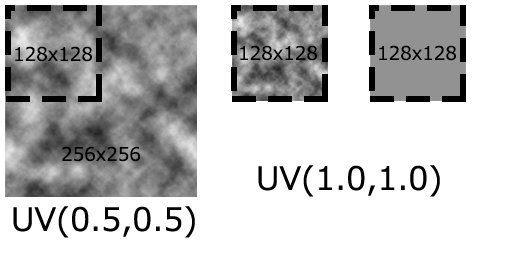
<style>
.page{position:relative;width:512px;height:256px;background:#ffffff}
.page>*{position:absolute;margin:0}
.t1{font:18.7px "MeiryoUI";color:#000000}
.t2{font:32px "MeiryoUI";color:#000000}
</style>
<div class="page">
<p class="t1" style="left:15px;top:46px;width:77px;height:16px">128x128</p>
<p class="t1" style="left:240px;top:45px;width:77px;height:16px">128x128</p>
<p class="t1" style="left:379px;top:45px;width:77px;height:16px">128x128</p>
<p class="t1" style="left:62px;top:146px;width:79px;height:16px">256x256</p>
<p class="t2" style="left:258px;top:165px;width:182px;height:32px">UV(1.0,1.0)</p>
<p class="t2" style="left:13px;top:206px;width:182px;height:32px">UV(0.5,0.5)</p>
</div>
